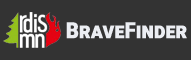
<style>
.page{position:relative;width:191px;height:60px;background:#333333}
.page>*{position:absolute;margin:0}
.t1{font:22px "Roboto-Black";color:#eceef3;font-variant:small-caps;font-weight:bold;scale:0.9 1}
</style>
<div class="page">
<p class="t1" style="left:66px;top:22px;width:121px;height:17px">BraveFinder</p>
</div>
